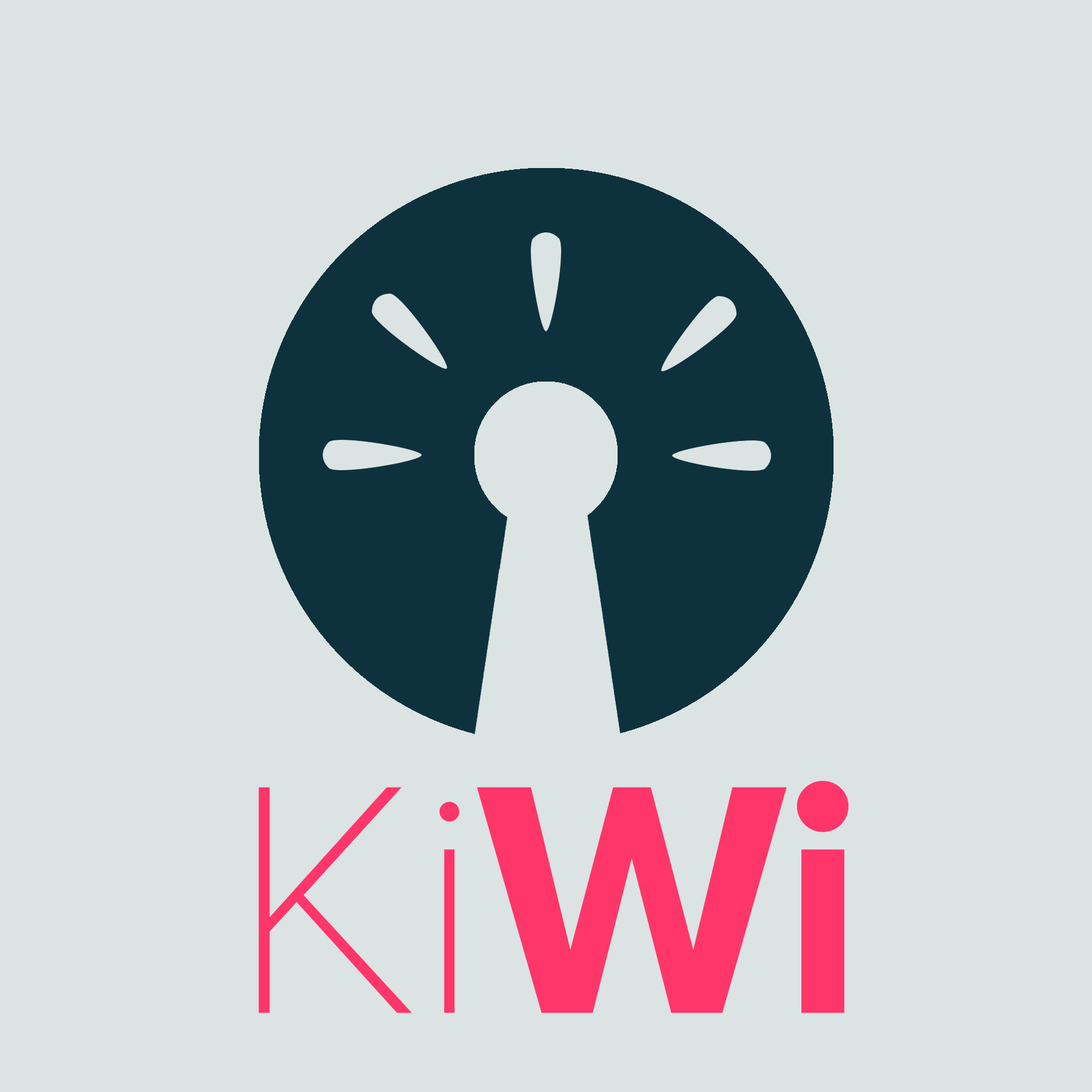
<style>
.page{position:relative;width:1092px;height:1092px;background:#dce3e3}
.page>*{position:absolute;margin:0}
.t1{font:337.8px "ProximaNovaT-Thin";letter-spacing:-0.02em;color:#fe3669}
.t2{font:337.8px "ProximaNova-Bold";letter-spacing:-0.02em;color:#fe3669}
</style>
<div class="page">
<p class="t1" style="left:258px;top:781px;width:591px;height:232px">Ki<span class="t2">Wi</span></p>
</div>
